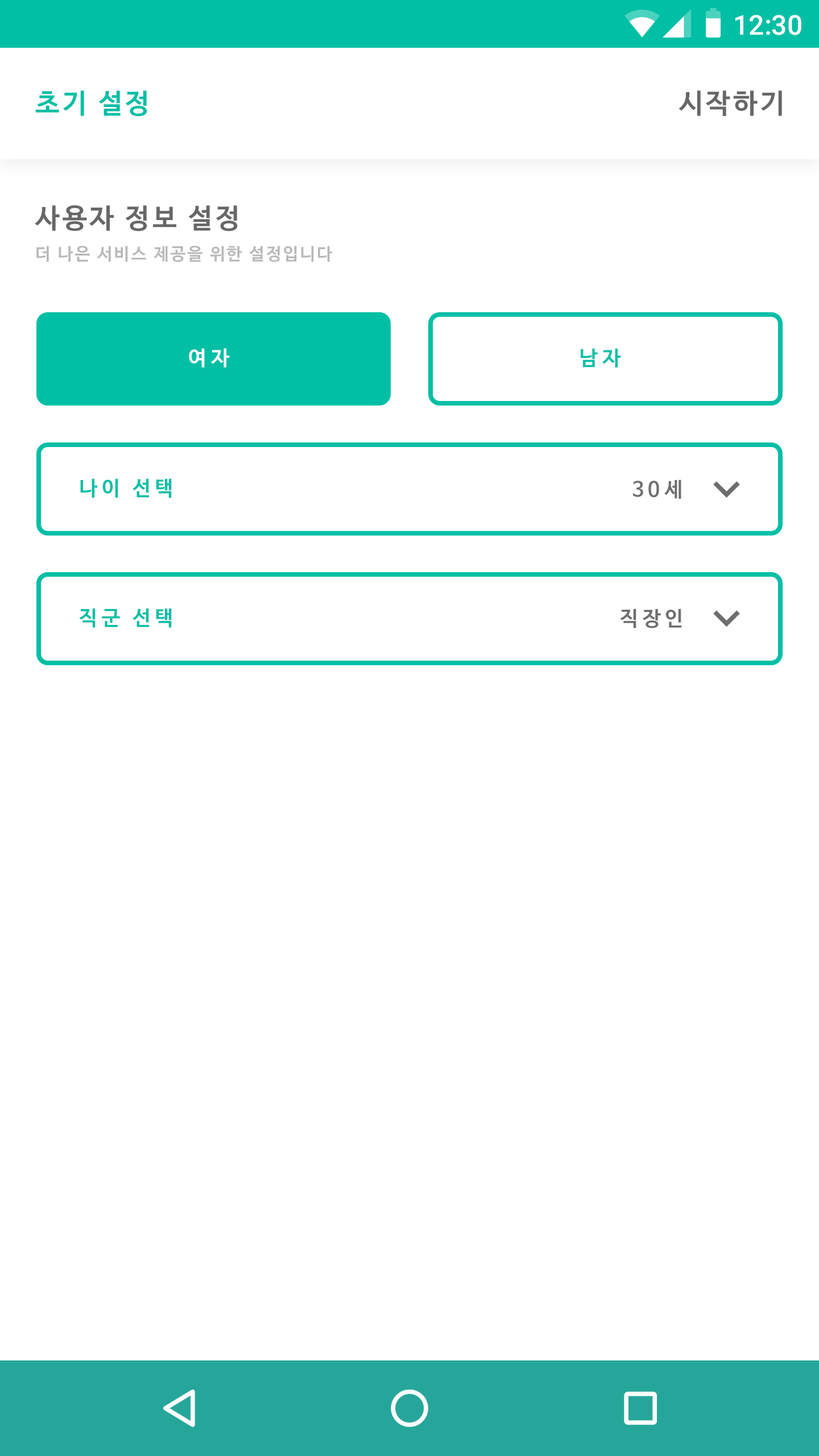
<style>
.page{position:relative;width:819px;height:1456px;background:#ffffff}
.page>*{position:absolute;margin:0}
.t1{font:27.3px "Roboto-Medium";color:#ffffff}
.t2{font:27.3px "NanumBarunGothicBold";letter-spacing:0.1em;color:#00bfa5}
.t3{font:27.3px "NanumBarunGothicBold";letter-spacing:0.1em;color:#676767}
.t4{font:17.1px "NanumBarunGothicBold";letter-spacing:0.1em;color:#b8b8b8}
.t5{font:20.5px "NanumBarunGothicBold";letter-spacing:0.2em;color:#ffffff}
.t6{font:20.5px "NanumBarunGothicBold";letter-spacing:0.2em;color:#00bfa5}
.t7{font:20.5px "NanumBarunGothicBold";letter-spacing:0.2em;color:#6d6d6d}
</style>
<div class="page">
<p class="t1" style="left:735px;top:15px;width:66px;height:20px">12:30</p>
<p class="t2" style="left:35px;top:90px;width:112px;height:27px">초기 설정</p>
<p class="t3" style="left:679px;top:90px;width:103px;height:26px">시작하기</p>
<p class="t3" style="left:35px;top:205px;width:203px;height:26px">사용자 정보 설정</p>
<p class="t4" style="left:36px;top:246px;width:296px;height:16px">더 나은 서비스 제공을 위한 설정입니다</p>
<p class="t5" style="left:189px;top:348px;width:41px;height:19px">여자</p>
<p class="t6" style="left:581px;top:348px;width:40px;height:19px">남자</p>
<p class="t6" style="left:80px;top:478px;width:92px;height:20px">나이 선택</p>
<p class="t7" style="left:633px;top:479px;width:48px;height:20px">30세</p>
<p class="t6" style="left:79px;top:608px;width:93px;height:20px">직군 선택</p>
<p class="t7" style="left:620px;top:609px;width:62px;height:19px">직장인</p>
</div>
